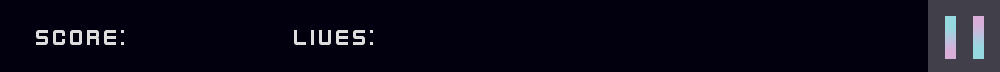
<style>
.page{position:relative;width:1000px;height:72px;background:#02000e}
.page>*{position:absolute;margin:0}
.t1{font:24px "KenVector-Future-Thin";color:#dddddd}
</style>
<div class="page">
<p class="t1" style="left:36px;top:30px;width:88px;height:15px">SCOre:</p>
<p class="t1" style="left:294px;top:30px;width:79px;height:15px">LIVEs:</p>
</div>
